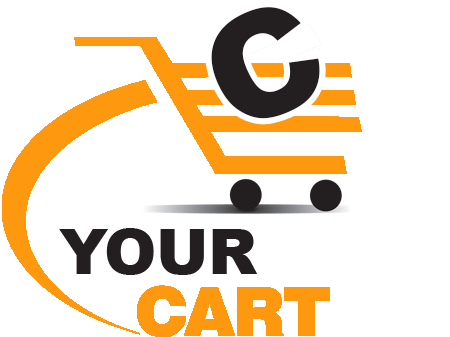
<style>
.page{position:relative;width:450px;height:337px;background:#ffffff}
.page>*{position:absolute;margin:0}
.t1{font:145.9px "Arial-Black";color:#231f20}
.t2{font:62.5px "Arial-Black";color:#231f20}
</style>
<div class="page">
<p class="t1" style="left:211px;top:7px;width:109px;height:112px;rotate:-25deg">C</p>
<p class="t2" style="left:59px;top:228px;width:198px;height:47px">YOUR</p>
</div>
